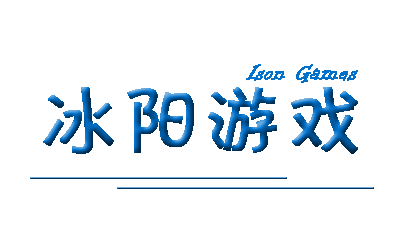
<style>
.page{position:relative;width:400px;height:250px;background:#ffffff}
.page>*{position:absolute;margin:0}
.t1{font:24px "InformalRoman-Regular";color:#0071cb;font-weight:bold}
.t2{font:80px "FZKATJW--GB1-0";font-weight:bold}
</style>
<div class="page">
<p class="t1" style="left:246px;top:64px;width:112px;height:19px">Ison Games</p>
<p class="t2" style="left:43px;top:87px;width:315px;height:67px">冰阳游戏</p>
</div>
